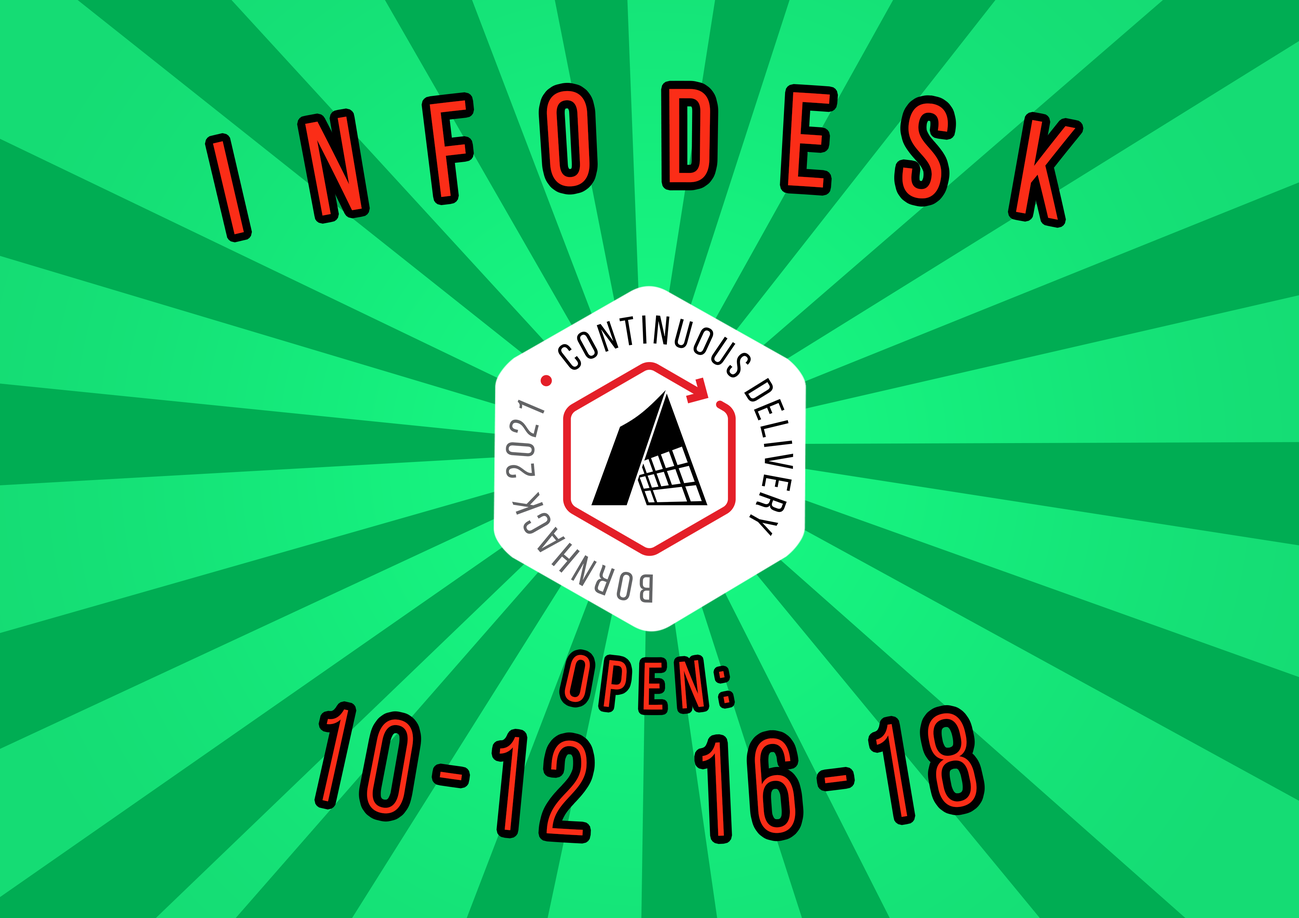
<style>
.page{position:relative;width:1299px;height:918px;background:#00ad53}
.page>*{position:absolute;margin:0}
.t1{font:133.3px "BebasNeueRegular";letter-spacing:0.58em;color:#fb2d17;scale:0.89 1}
.t2{font:66.6px "BebasNeueRegular";letter-spacing:0.24em;color:#fb2d17;scale:0.83 1}
.t3{font:133.3px "BebasNeueBook";letter-spacing:0.2em;color:#fb2d17;scale:0.83 1}
</style>
<div class="page">
<p class="t1" style="left:213px;top:89px;width:862px;height:145px">INFODESK</p>
<p class="t2" style="left:565px;top:655px;width:164px;height:55px">OPEN:</p>
<p class="t3" style="left:322px;top:709px;width:655px;height:127px">10-12  16-18</p>
</div>
